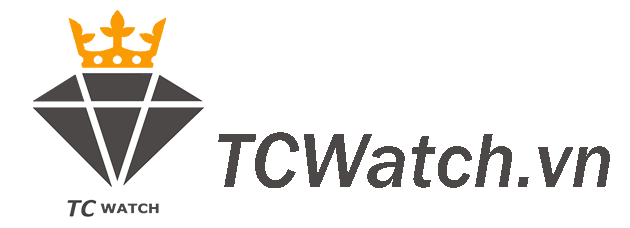
<style>
.page{position:relative;width:630px;height:228px;background:#ffffff}
.page>*{position:absolute;margin:0}
.t1{font:79.8px "FranklinGothic-MediumItalic";color:#4d4848}
</style>
<div class="page">
<p class="t1" style="left:218px;top:132px;width:392px;height:56px">TCWatch.vn</p>
</div>
